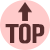
<style>
.page{position:relative;width:50px;height:50px;background:#ffcaca}
.page>*{position:absolute;margin:0}
.t1{font:21.2px "KoreanUJSN-R";color:#562d2d;font-weight:bold}
</style>
<div class="page">
<p class="t1" style="left:5px;top:23px;width:40px;height:21px">TOP</p>
</div>
